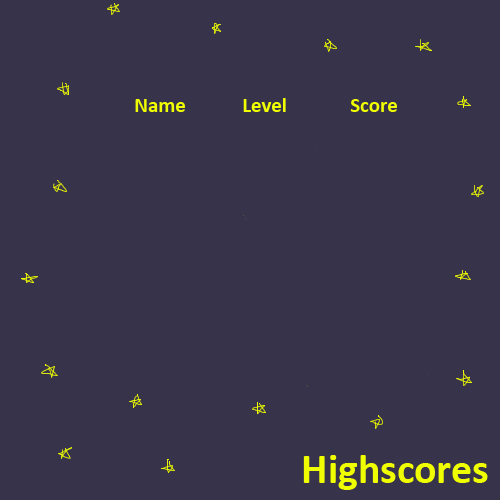
<style>
.page{position:relative;width:500px;height:500px;background:#37334b}
.page>*{position:absolute;margin:0}
.t1{font:20.8px "Calibri-Bold";color:#f0ff00}
.t2{font:41.7px "Calibri-Bold";color:#f0ff00}
</style>
<div class="page">
<p class="t1" style="left:135px;top:98px;width:262px;height:14px">Name  Level  Score</p>
<p class="t2" style="left:303px;top:455px;width:185px;height:35px">Highscores</p>
</div>
